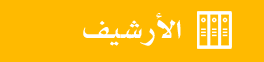
<style>
.page{position:relative;width:264px;height:62px;background:#ffba00}
.page>*{position:absolute;margin:0}
.t1{font:38px "Harf-Fannan";color:#ffffff}
</style>
<div class="page">
<p class="t1" style="left:83px;top:13px;width:98px;height:33px">الأرشيف</p>
</div>
